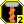
<style>
.page{position:relative;width:24px;height:24px;background:#000000}
.page>*{position:absolute;margin:0}
.t1{font:9px "Montserrat-Bold";color:#000000}
</style>
<div class="page">
<p class="t1" style="left:17px;top:16px;width:6px;height:7px">2</p>
</div>
